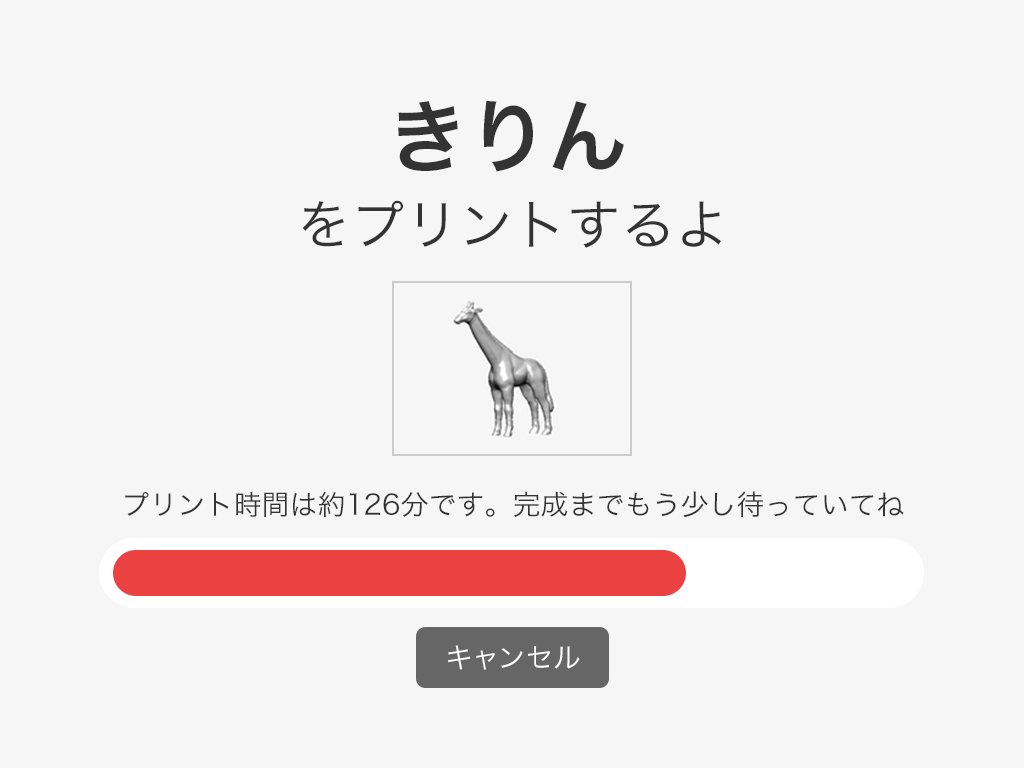
<style>
.page{position:relative;width:1024px;height:768px;background:#f6f6f6}
.page>*{position:absolute;margin:0}
.t1{font:80px "HiraKakuPro-W6";color:#333333}
.t2{font:54px "HiraKakuPro-W3";color:#333333}
.t3{font:28px "HiraKakuPro-W3";color:#333333}
.t4{font:28px "HiraKakuPro-W3";color:#ffffff}
</style>
<div class="page">
<p class="t1" style="left:398px;top:101px;width:226px;height:71px">きりん</p>
<p class="t2" style="left:302px;top:200px;width:419px;height:48px">をプリントするよ</p>
<p class="t3" style="left:125px;top:491px;width:779px;height:27px">プリント時間は約126分です。完成までもう少し待っていてね</p>
<p class="t4" style="left:448px;top:645px;width:132px;height:25px">キャンセル</p>
</div>
